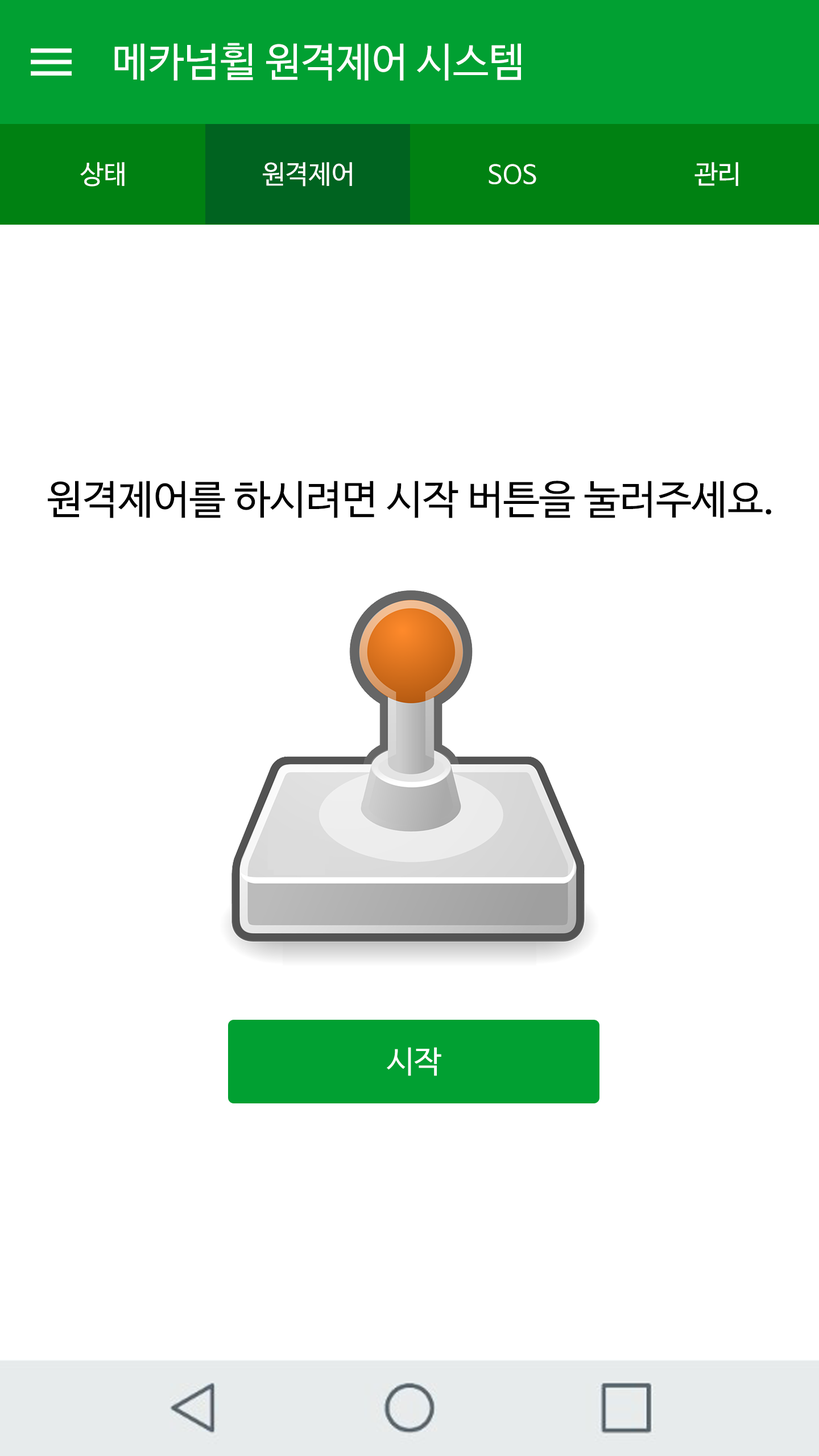
<style>
.page{position:relative;width:819px;height:1456px;background:#ffffff}
.page>*{position:absolute;margin:0}
.t1{font:40.3px "NanumBarunGothicOTF";color:#ffffff}
.t2{font:26.1px "NanumBarunGothicOTF";color:#ffffff}
.t3{font:40.3px "NanumBarunGothicOTF";color:#000000}
.t4{font:30.8px "NanumBarunGothicOTF";color:#ffffff}
</style>
<div class="page">
<p class="t1" style="left:114px;top:43px;width:407px;height:38px">메카넘휠 원격제어 시스템</p>
<p class="t2" style="left:80px;top:162px;width:45px;height:25px">상태</p>
<p class="t2" style="left:263px;top:162px;width:89px;height:25px">원격제어</p>
<p class="t2" style="left:489px;top:164px;width:47px;height:20px">SOS</p>
<p class="t2" style="left:694px;top:162px;width:44px;height:24px">관리</p>
<p class="t3" style="left:48px;top:481px;width:723px;height:37px">원격제어를 하시려면 시작 버튼을 눌러주세요.</p>
<p class="t4" style="left:387px;top:1047px;width:54px;height:29px">시작</p>
</div>
